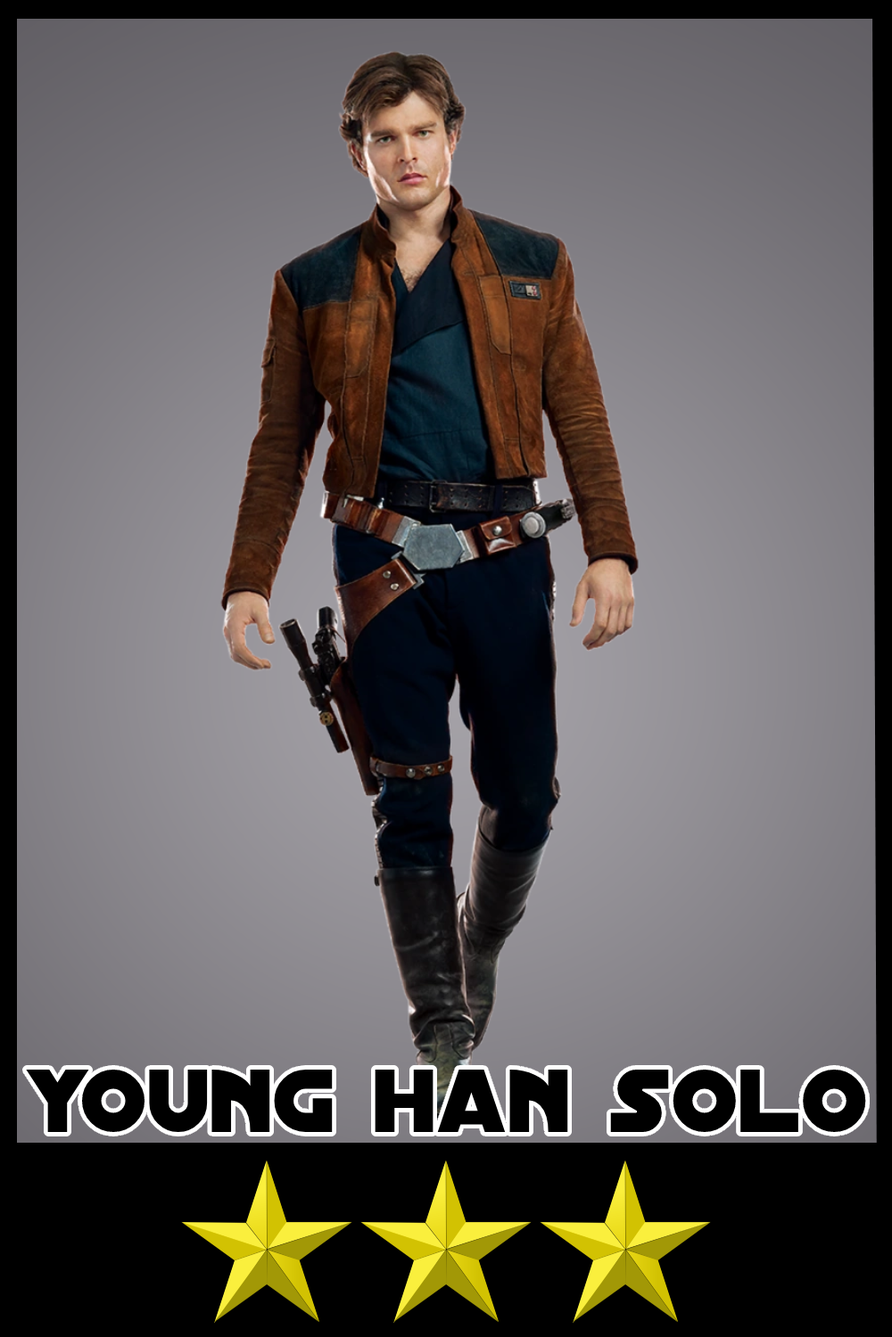
<style>
.page{position:relative;width:892px;height:1337px}
.page>*{position:absolute;margin:0}
.t1{font:96.1px "DistantGalaxy";color:#000000}
</style>
<div class="page">
<p class="t1" style="left:26px;top:1070px;width:840px;height:62px">young han solo</p>
</div>
